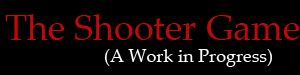
<style>
.page{position:relative;width:300px;height:75px;background:#000000}
.page>*{position:absolute;margin:0}
.t1{font:36px "PalatinoLinotype-Roman";color:#bf0808}
.t2{font:18px "PalatinoLinotype-Roman";color:#ffffff}
</style>
<div class="page">
<p class="t1" style="left:5px;top:14px;width:294px;height:26px">The Shooter Game</p>
<p class="t2" style="left:104px;top:49px;width:168px;height:18px">(A Work in Progress)</p>
</div>
